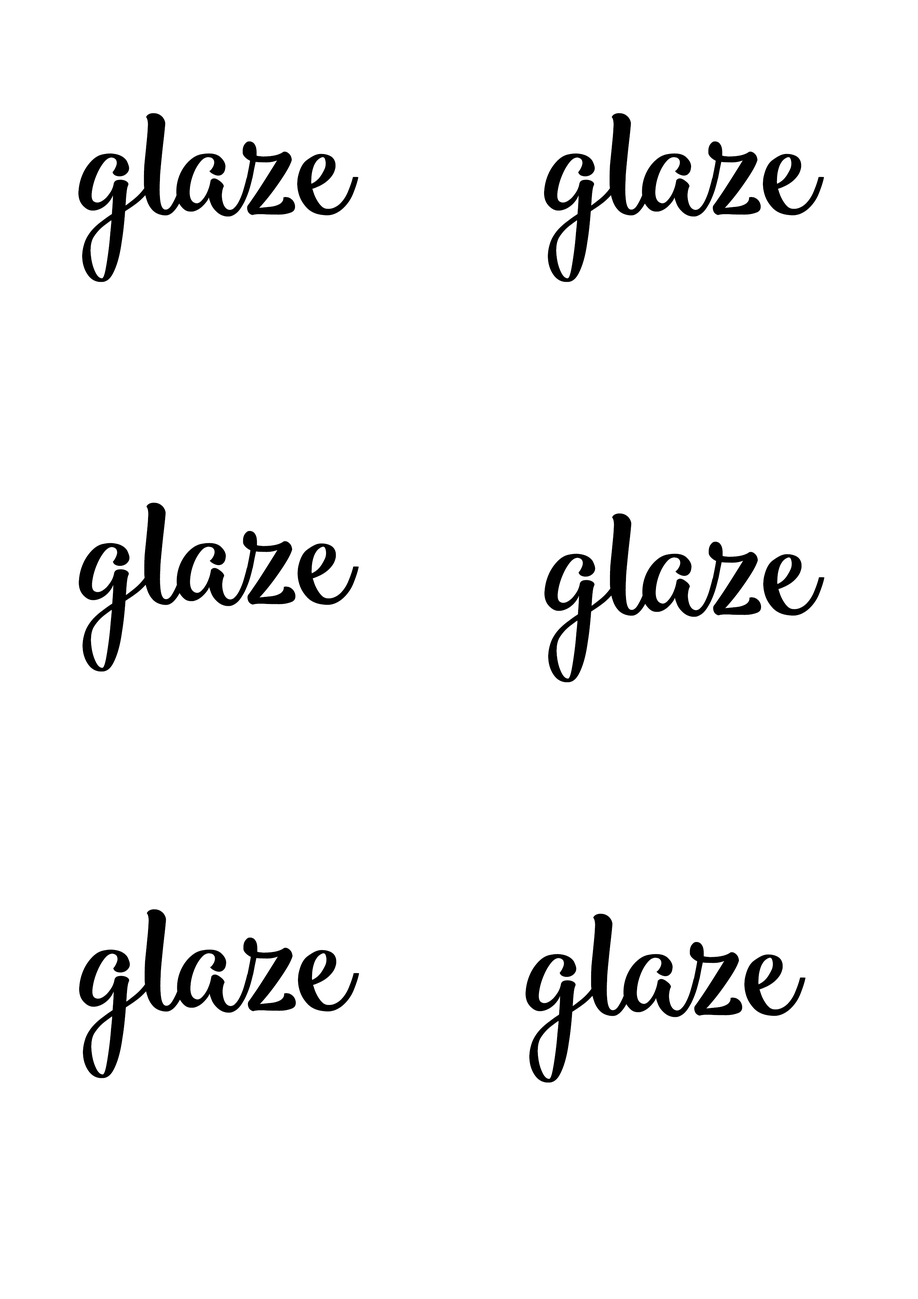
<style>
.page{position:relative;width:918px;height:1299px;background:#ffffff}
.page>*{position:absolute;margin:0}
.t1{font:155px "Smoothie_Shoppe";color:#000000}
</style>
<div class="page">
<p class="t1" style="left:78px;top:113px;width:280px;height:169px">glaze</p>
<p class="t1" style="left:544px;top:113px;width:280px;height:169px">glaze</p>
<p class="t1" style="left:78px;top:502px;width:281px;height:170px">glaze</p>
<p class="t1" style="left:544px;top:513px;width:280px;height:169px">glaze</p>
<p class="t1" style="left:79px;top:909px;width:280px;height:169px">glaze</p>
<p class="t1" style="left:525px;top:913px;width:281px;height:170px">glaze</p>
</div>
